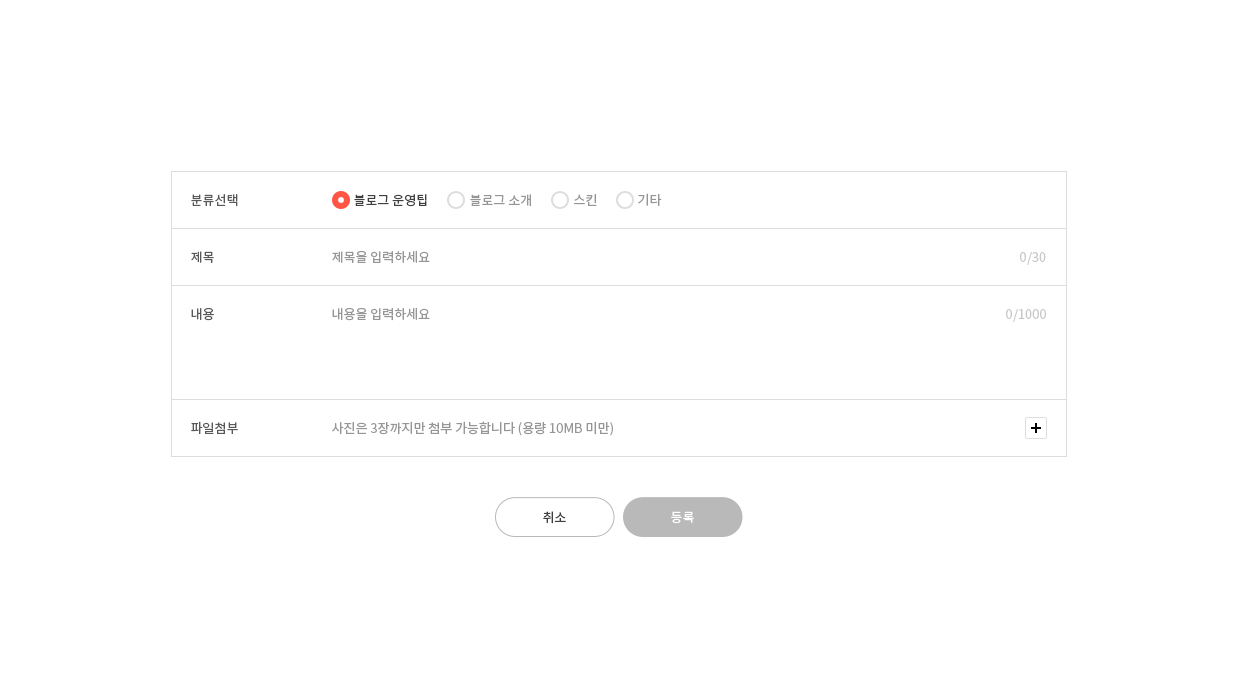
<style>
.page{position:relative;width:1238px;height:679px;background:#ffffff}
.page>*{position:absolute;margin:0}
.t1{font:13px "NotoSansKR-Regular";color:#595959}
.t2{font:13px "NotoSansKR-Regular";color:#3f3f3f}
.t3{font:13px "NotoSansKR-Regular";color:#969696}
.t4{font:13px "NotoSansKR-Regular";color:#c7c7c7}
.t5{font:13px "NotoSansKR-Regular";color:#ffffff}
</style>
<div class="page">
<p class="t1" style="left:191px;top:194px;width:47px;height:13px">분류선택</p>
<p class="t2" style="left:354px;top:194px;width:73px;height:13px">블로그 운영팁</p>
<p class="t3" style="left:470px;top:194px;width:61px;height:13px">블로그 소개</p>
<p class="t3" style="left:574px;top:194px;width:23px;height:12px">스킨</p>
<p class="t3" style="left:638px;top:193px;width:24px;height:13px">기타</p>
<p class="t1" style="left:191px;top:251px;width:23px;height:12px">제목</p>
<p class="t3" style="left:332px;top:250px;width:98px;height:14px">제목을 입력하세요</p>
<p class="t4" style="left:1020px;top:252px;width:26px;height:13px">0/30</p>
<p class="t1" style="left:191px;top:308px;width:23px;height:13px">내용</p>
<p class="t3" style="left:332px;top:307px;width:98px;height:14px">내용을 입력하세요</p>
<p class="t4" style="left:1006px;top:309px;width:40px;height:13px">0/1000</p>
<p class="t1" style="left:191px;top:421px;width:47px;height:13px">파일첨부</p>
<p class="t3" style="left:332px;top:421px;width:281px;height:15px">사진은 3장까지만 첨부 가능합니다 (용량 10MB 미만)</p>
<p class="t2" style="left:543px;top:511px;width:23px;height:13px">취소</p>
<p class="t5" style="left:671px;top:511px;width:23px;height:13px">등록</p>
</div>
